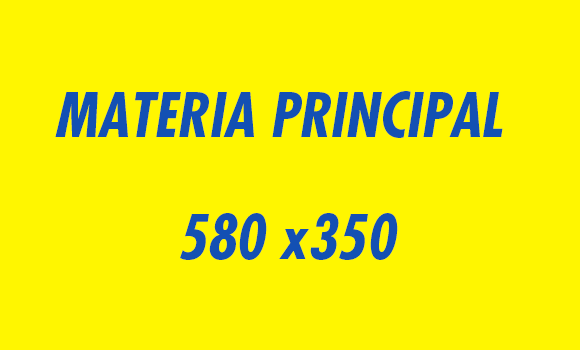
<style>
.page{position:relative;width:580px;height:350px;background:#fff600}
.page>*{position:absolute;margin:0}
.t1{font:59.3px/60.8px "FuturaStd-CondensedBoldObl";color:#1350b3}
</style>
<div class="page">
<p class="t1" style="left:55px;top:91px;width:448px;height:169px;text-align:center">MATERIA PRINCIPAL <br><br>580 x350</p>
</div>
